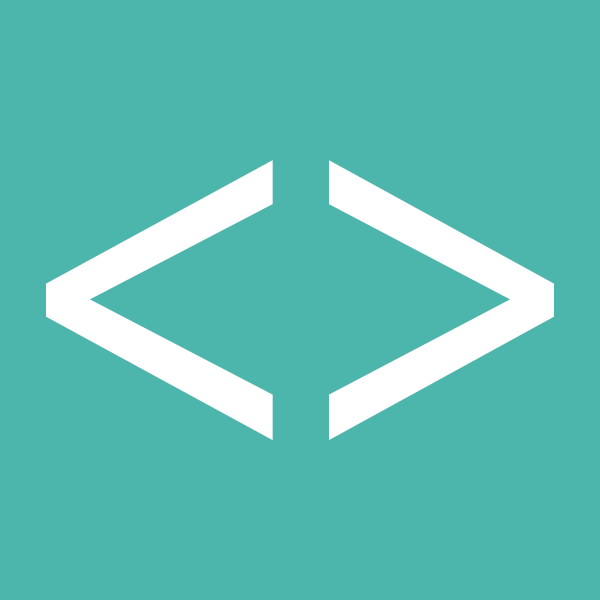
<style>
.page{position:relative;width:600px;height:600px;background:#4db6ac}
.page>*{position:absolute;margin:0}
.t1{font:400px "FZLTZHK--GBK1-0";letter-spacing:0.02em;color:#ffffff}
</style>
<div class="page">
<p class="t1" style="left:46px;top:160px;width:508px;height:280px">&lt;&gt;</p>
</div>
